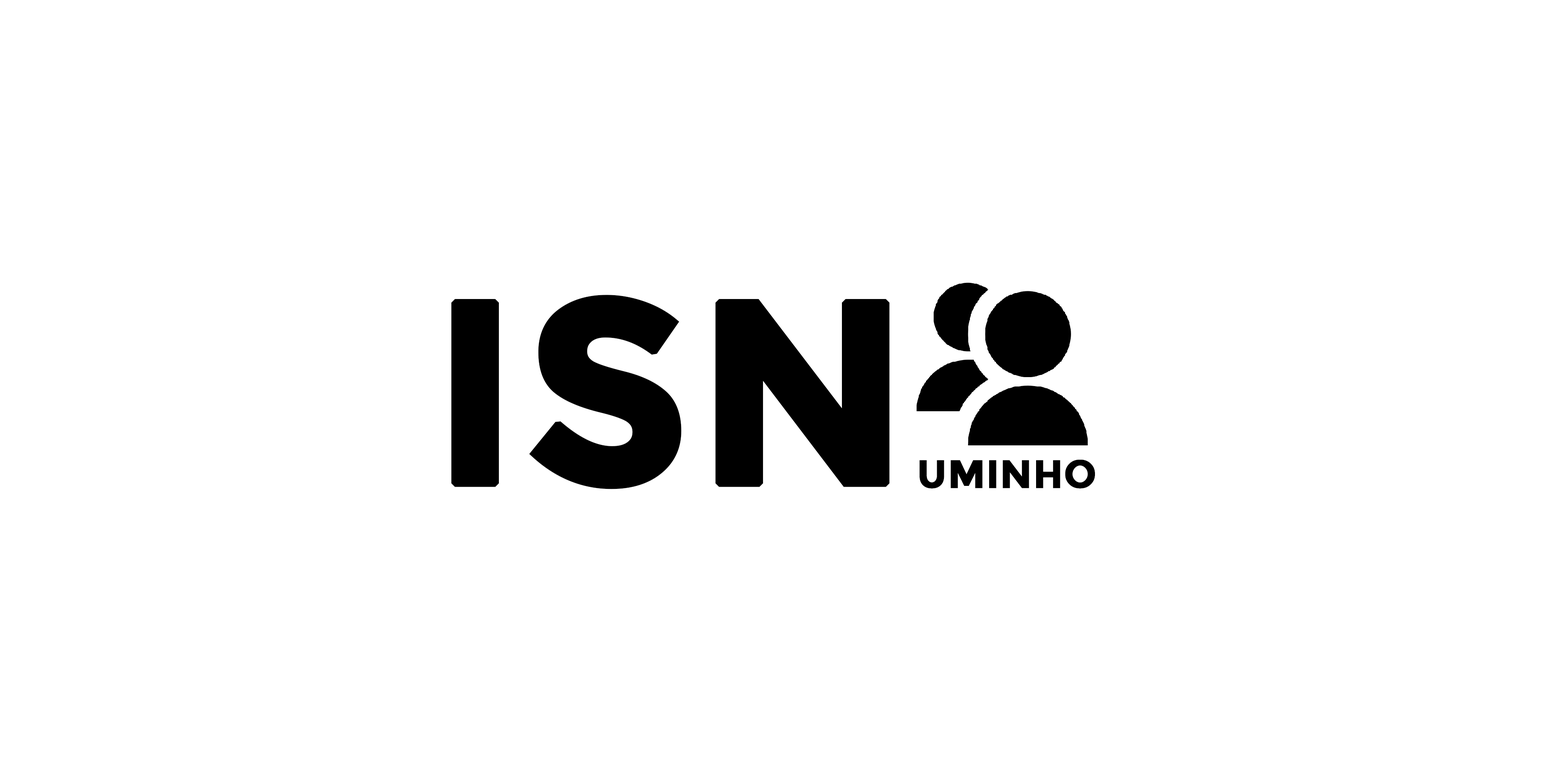
<style>
.page{position:relative;width:1549px;height:770px;background:#ffffff}
.page>*{position:absolute;margin:0}
.t1{font:258.7px "Montserrat-Bold";color:#000000;font-weight:bold}
.t2{font:39.1px "Montserrat-Bold";color:#000000;font-weight:bold}
</style>
<div class="page">
<p class="t1" style="left:451px;top:295px;width:438px;height:194px">ISN</p>
<p class="t2" style="left:919px;top:459px;width:176px;height:29px">UMINHO</p>
</div>
